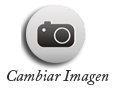
<style>
.page{position:relative;width:113px;height:88px;background:#ffffff}
.page>*{position:absolute;margin:0}
.t1{font:16px "ACaslonPro-Italic";color:#2c2c2c}
</style>
<div class="page">
<p class="t1" style="left:7px;top:70px;width:102px;height:15px">Cambiar Imagen</p>
</div>
